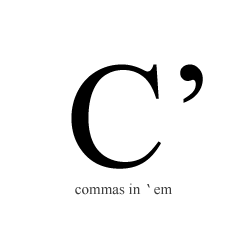
<style>
.page{position:relative;width:250px;height:250px;background:#ffffff}
.page>*{position:absolute;margin:0}
.t1{font:150px "TimesNewRomanPSMT";color:#000000}
.t2{font:15px "TimesNewRomanPSMT";color:#3e3e3e}
.t3{font:15px "NanumBarunGothic";color:#3e3e3e}
</style>
<div class="page">
<p class="t1" style="left:71px;top:64px;width:132px;height:105px">C’</p>
<p class="t2" style="left:75px;top:183px;width:66px;height:12px">commas in</p>
<p class="t3" style="left:147px;top:184px;width:3px;height:4px">｀</p>
<p class="t2" style="left:154px;top:187px;width:18px;height:8px">em</p>
</div>
